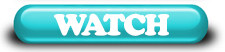
<style>
.page{position:relative;width:225px;height:52px}
.page>*{position:absolute;margin:0}
.t1{font:30px "CooperBlackStd";letter-spacing:-0.06em;color:#ffffff}
</style>
<div class="page">
<p class="t1" style="left:54px;top:13px;width:116px;height:23px">WATCH</p>
</div>
